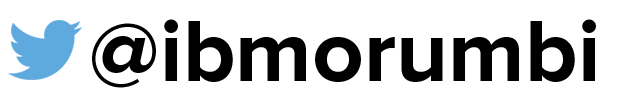
<style>
.page{position:relative;width:624px;height:100px;background:#ffffff}
.page>*{position:absolute;margin:0}
.t1{font:90px "ProximaNova-Bold";color:#000000}
</style>
<div class="page">
<p class="t1" style="left:92px;top:19px;width:504px;height:69px">@ibmorumbi</p>
</div>
